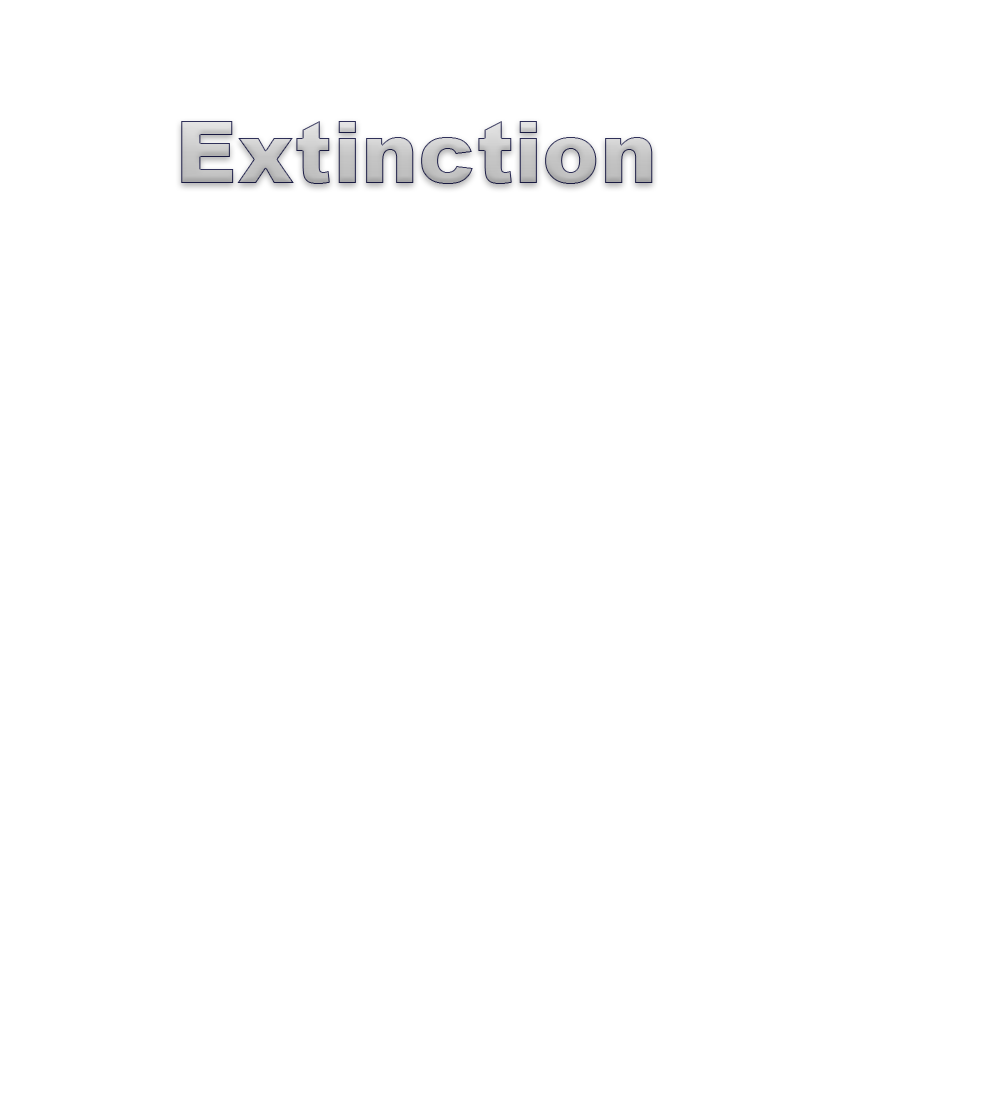
<style>
.page{position:relative;width:995px;height:1103px;background:#ffffff}
.page>*{position:absolute;margin:0}
.t1{font:85.9px "Arial-Black"}
</style>
<div class="page">
<p class="t1" style="left:181px;top:121px;width:472px;height:63px">Extinction</p>
</div>
